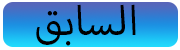
<style>
.page{position:relative;width:180px;height:50px}
.page>*{position:absolute;margin:0}
.t1{font:58.3px "MyriadArabic-Regular";color:#000000}
</style>
<div class="page">
<p class="t1" style="left:36px;top:4px;width:100px;height:42px">السابق</p>
</div>
